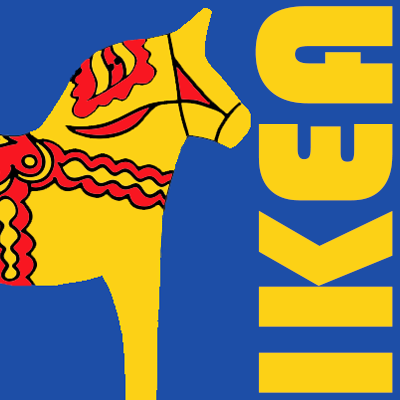
<style>
.page{position:relative;width:400px;height:400px;background:#1d4ea7}
.page>*{position:absolute;margin:0}
.t1{font:200px "Bauhaus93";color:#fcd116}
</style>
<div class="page">
<p class="t1" style="left:255px;top:6px;width:138px;height:387px;rotate:-90deg">IKEA</p>
</div>
